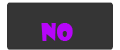
<style>
.page{position:relative;width:120px;height:50px;background:#353535}
.page>*{position:absolute;margin:0}
.t1{font:24px "ShowcardGothic-Reg";color:#b705f9}
</style>
<div class="page">
<p class="t1" style="left:41px;top:23px;width:32px;height:18px">No</p>
</div>
